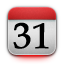
<style>
.page{position:relative;width:64px;height:64px}
.page>*{position:absolute;margin:0}
.t1{font:36px "BookAntiqua";color:#000000;font-weight:bold}
</style>
<div class="page">
<p class="t1" style="left:13px;top:22px;width:36px;height:27px">31</p>
</div>
